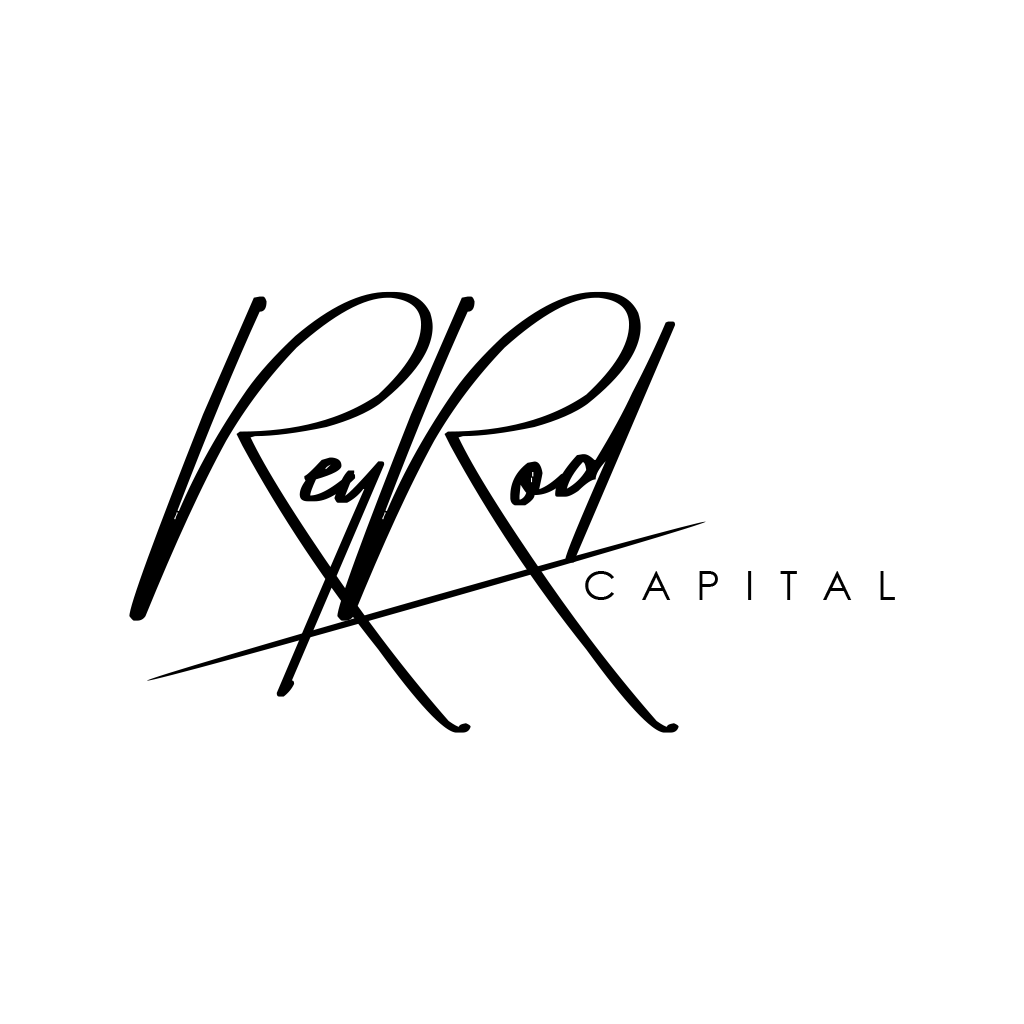
<style>
.page{position:relative;width:1024px;height:1024px;background:#ffffff}
.page>*{position:absolute;margin:0}
.t1{font:328px "TakenbyVulturesDemo";color:#000000}
.t2{font:41.2px "CenturyGothic";letter-spacing:0.6em;color:#000000}
</style>
<div class="page">
<p class="t1" style="left:129px;top:291px;width:550px;height:442px">ReyRod</p>
<p class="t2" style="left:585px;top:571px;width:310px;height:29px">CAPITAL</p>
</div>
